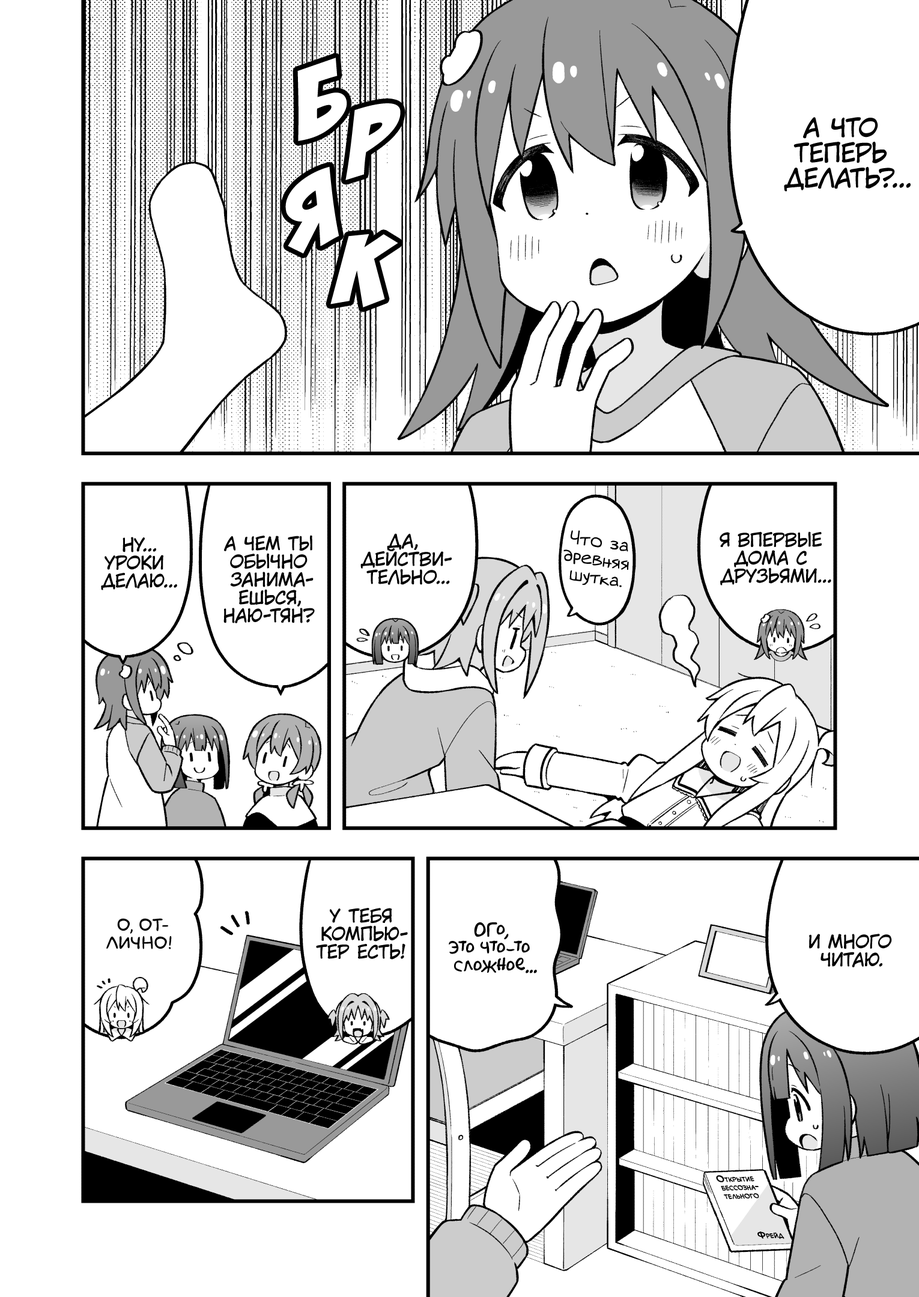
<style>
.page{position:relative;width:919px;height:1297px;background:#ffffff}
.page>*{position:absolute;margin:0}
.t1{font:108.1px "BadaBoom";color:#ffffff;scale:1.2 1}
.t2{font:25.2px "KuraiVoice2";color:#000000;text-transform:uppercase}
.t3{font:18px "KuraiVoice2";color:#000000;text-transform:uppercase}
.t4{font:18px "v_Augie";color:#000000}
.t5{font:18px "laCartoonerie";color:#000000;text-transform:uppercase}
.t6{font:18px "AkbarPlain";color:#000000}
.t7{font:9px "v_CCMonologous";color:#000000;font-variant:small-caps;font-weight:bold}
</style>
<div class="page">
<p class="t1" style="left:297px;top:58px;width:50px;height:83px;rotate:-11deg">б</p>
<p class="t1" style="left:345px;top:103px;width:56px;height:77px;rotate:-4deg">р</p>
<p class="t2" style="left:784px;top:117px;width:127px;height:75px;text-align:center">А что<br>теперь<br>делать?...</p>
<p class="t1" style="left:285px;top:166px;width:54px;height:87px;rotate:-18deg">я</p>
<p class="t1" style="left:330px;top:234px;width:68px;height:74px;rotate:3deg">к</p>
<p class="t3" style="left:360px;top:533px;width:92px;height:52px;text-align:center">Да,<br>действи-<br>тельно...</p>
<p class="t4" style="left:563px;top:530px;width:66px;height:57px;text-align:center;rotate:9deg">Что за<br>древняя<br>шутка.</p>
<p class="t3" style="left:720px;top:532px;width:111px;height:54px;text-align:center">Я впервые<br>дома с<br>друзьями...</p>
<p class="t3" style="left:101px;top:537px;width:76px;height:53px;text-align:center">Ну...<br>Уроки<br>делаю...</p>
<p class="t3" style="left:223px;top:535px;width:92px;height:89px;text-align:center">А чем ты<br>обычно<br>занима-<br>ешься,<br>Наю-тян?</p>
<p class="t3" style="left:316px;top:908px;width:92px;height:52px;text-align:center">У тебя<br>компью-<br>тер есть!</p>
<p class="t5" style="left:106px;top:918px;width:66px;height:32px;text-align:center">О, от-<br>лично!</p>
<p class="t6" style="left:449px;top:923px;width:88px;height:51px;text-align:center">Ого,<br>это что-то<br>сложное...</p>
<p class="t3" style="left:809px;top:934px;width:83px;height:34px;text-align:center">И много<br>читаю.</p>
<p class="t7" style="left:716px;top:1176px;width:43px;height:24px;text-align:center;rotate:-1deg">Открытие<br>бессозна-<br>тельного</p>
<p class="t7" style="left:757px;top:1232px;width:27px;height:8px;rotate:-1deg">Фрейд</p>
</div>
